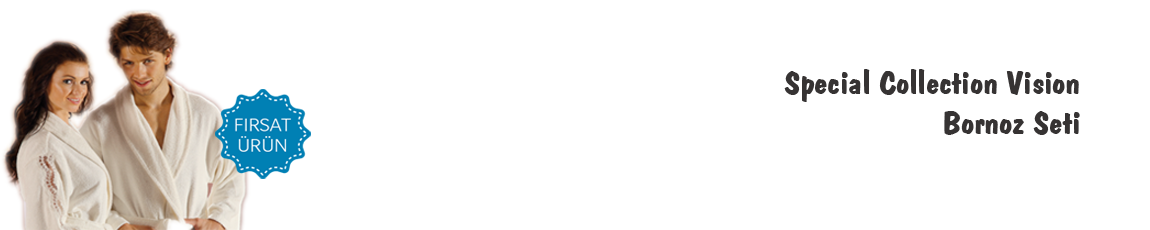
<style>
.page{position:relative;width:1150px;height:230px;background:#ffffff}
.page>*{position:absolute;margin:0}
.t1{font:33.1px "DomBoldBT-Regular";color:#363333;scale:1.07 1}
</style>
<div class="page">
<p class="t1" style="left:784px;top:69px;width:296px;height:66px;text-align:right">Special Collection Vision<br>Bornoz Seti</p>
</div>
